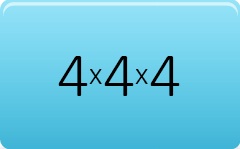
<style>
.page{position:relative;width:240px;height:149px}
.page>*{position:absolute;margin:0}
.t1{font:64px "Calibri-Light";color:#000000}
.t2{font:32px "Calibri-Light";color:#000000}
</style>
<div class="page">
<p class="t1" style="left:58px;top:56px;width:122px;height:40px">4<span class="t2">x</span>4<span class="t2">x</span>4</p>
</div>
